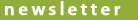
<style>
.page{position:relative;width:138px;height:20px;background:#91ae3d}
.page>*{position:absolute;margin:0}
.t1{font:18.8px "MyriadPro-Semibold";letter-spacing:0.15em;color:#ffffff;font-weight:bold}
</style>
<div class="page">
<p class="t1" style="left:5px;top:1px;width:116px;height:15px">newsletter</p>
</div>
